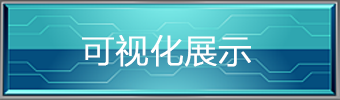
<style>
.page{position:relative;width:340px;height:100px}
.page>*{position:absolute;margin:0}
.t1{font:33.3px "MicrosoftYaHeiLight";color:#ffffff;font-weight:bold}
</style>
<div class="page">
<p class="t1" style="left:82px;top:35px;width:169px;height:32px">可视化展示</p>
</div>
